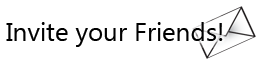
<style>
.page{position:relative;width:256px;height:64px;background:#ffffff}
.page>*{position:absolute;margin:0}
.t1{font:26px "SegoeUI";color:#000000}
</style>
<div class="page">
<p class="t1" style="left:6px;top:22px;width:217px;height:25px">Invite your Friends!</p>
</div>
